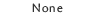
<style>
.page{position:relative;width:96px;height:16px;background:#ffffff}
.page>*{position:absolute;margin:0}
.t1{font:12px "Amira-Light";letter-spacing:0.1em;color:#333333}
</style>
<div class="page">
<p class="t1" style="left:32px;top:3px;width:31px;height:10px">None</p>
</div>
